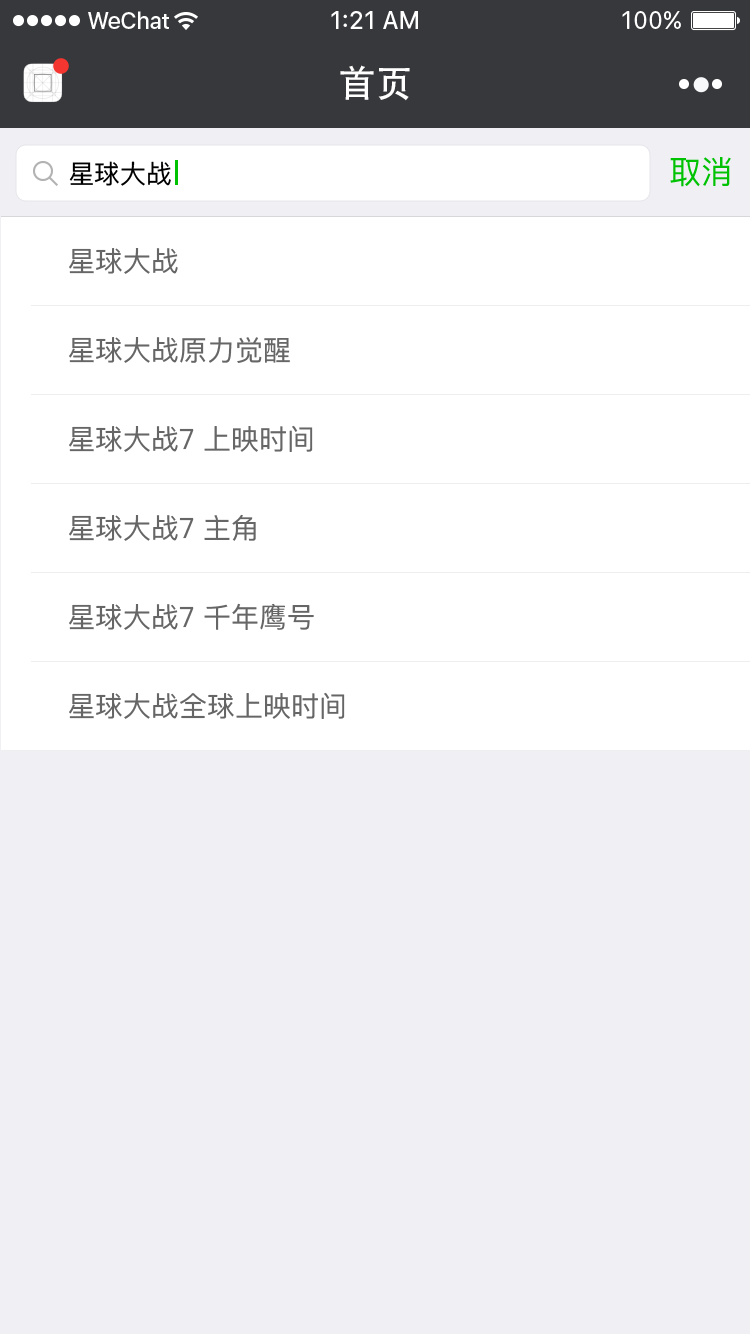
<style>
.page{position:relative;width:750px;height:1334px;background:#efeff4}
.page>*{position:absolute;margin:0}
.t1{font:37px "AdobeHeitiStd-Regular";color:#ffffff}
.t2{font:26px "PingFangSC-Regular";color:#000000}
.t3{font:32px "PingFangSC-Regular";color:#00c203}
.t4{font:28px "PingFangSC-Regular";color:#666666}
</style>
<div class="page">
<p class="t1" style="left:340px;top:65px;width:70px;height:36px">首页</p>
<p class="t2" style="left:69px;top:161px;width:102px;height:25px">星球大战</p>
<p class="t3" style="left:670px;top:157px;width:61px;height:30px">取消</p>
<p class="t4" style="left:69px;top:248px;width:109px;height:26px">星球大战</p>
<p class="t4" style="left:69px;top:337px;width:221px;height:26px">星球大战原力觉醒</p>
<p class="t4" style="left:69px;top:425px;width:244px;height:27px">星球大战7 上映时间</p>
<p class="t4" style="left:69px;top:514px;width:187px;height:27px">星球大战7 主角</p>
<p class="t4" style="left:69px;top:603px;width:245px;height:27px">星球大战7 千年鹰号</p>
<p class="t4" style="left:69px;top:692px;width:276px;height:27px">星球大战全球上映时间</p>
</div>
